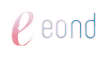
<style>
.page{position:relative;width:107px;height:57px;background:#ffffff}
.page>*{position:absolute;margin:0}
.t1{font:36px "071MKSD-01Medium"}
</style>
<div class="page">
<p class="t1" style="left:41px;top:12px;width:56px;height:28px">eond</p>
</div>
